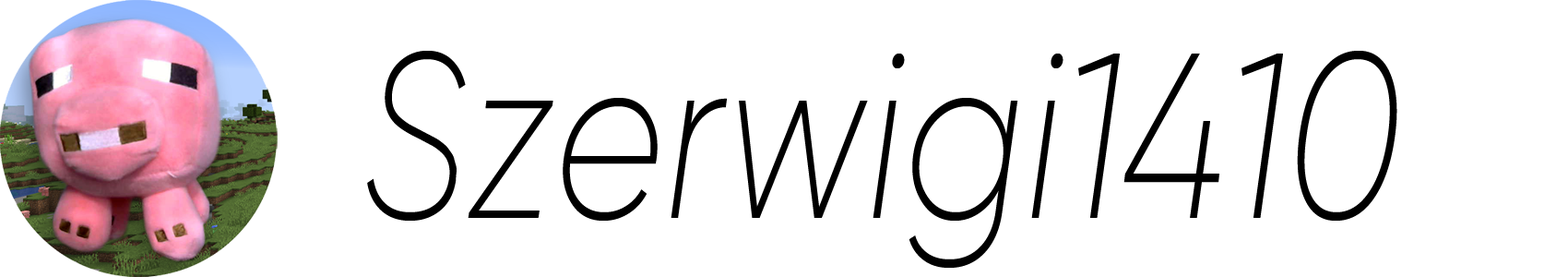
<style>
.page{position:relative;width:1568px;height:277px;background:#ffffff}
.page>*{position:absolute;margin:0}
.t1{font:234.7px "Gilroy-UltraLightItalic";color:#000000;scale:0.79 1}
</style>
<div class="page">
<p class="t1" style="left:367px;top:51px;width:1030px;height:216px">Szerwigi1410</p>
</div>
